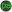
<style>
.page{position:relative;width:12px;height:12px;background:#3b3b3b}
.page>*{position:absolute;margin:0}
.t1{font:9.6px "Raavi";color:#1ebb0e}
</style>
<div class="page">
<p class="t1" style="left:2px;top:3px;width:9px;height:7px">pa</p>
</div>
